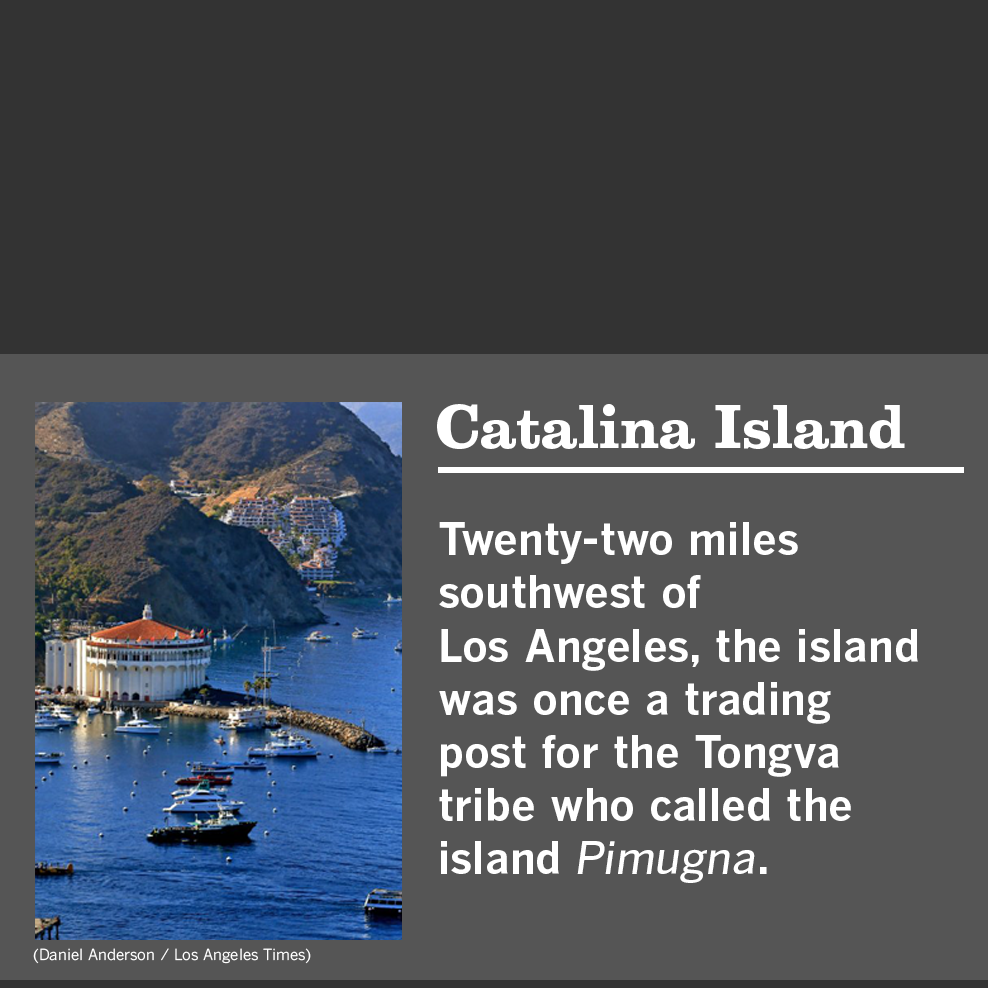
<style>
.page{position:relative;width:988px;height:988px;background:#333333}
.page>*{position:absolute;margin:0}
.t1{font:55.7px "Belizio-Bold";color:#ffffff}
.t2{font:44.3px "BentonGothic-Bold";color:#ffffff}
.t3{font:38px "Belizio-Bold";color:#ffffff}
.t4{font:44.3px "BentonGothic-MediumItalic";color:#ffffff}
.t5{font:15.2px "BentonGothicTab-Regular";color:#ffffff}
</style>
<div class="page">
<p class="t1" style="left:437px;top:404px;width:468px;height:45px">Catalina Island</p>
<p class="t2" style="left:439px;top:522px;width:479px;height:361px"><span class="t3"><br></span>Twenty-two miles<br>southwest of<br>Los Angeles, the island was once a trading<br>post for the Tongva tribe who called the island <span class="t4">Pimugna</span>.</p>
<p class="t5" style="left:33px;top:948px;width:278px;height:16px">(Daniel Anderson / Los Angeles Times)</p>
</div>
